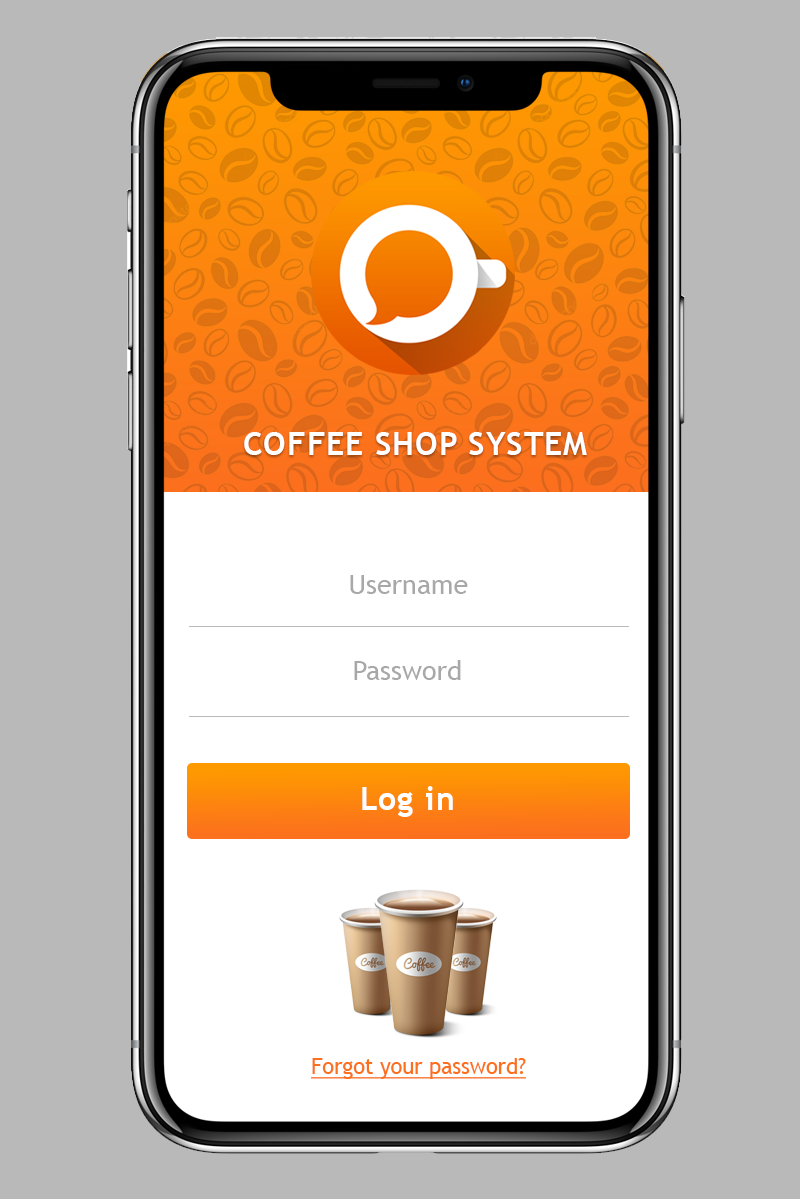
<style>
.page{position:relative;width:800px;height:1200px;background:#b9b9b9}
.page>*{position:absolute;margin:0}
.t1{font:32px "TrebuchetMS-Bold";letter-spacing:0.03em;color:#ffffff;text-transform:uppercase}
.t2{font:27px "TrebuchetMS";color:#a8a8a8}
.t3{font:32px "TrebuchetMS-Bold";letter-spacing:0.03em;color:#ffffff}
.t4{font:21.6px "TrebuchetMS";color:#fc701d;text-decoration:underline}
</style>
<div class="page">
<p class="t1" style="left:244px;top:432px;width:343px;height:23px">Coffee Shop System</p>
<p class="t2" style="left:350px;top:575px;width:118px;height:19px">Username</p>
<p class="t2" style="left:354px;top:660px;width:107px;height:20px">Password</p>
<p class="t3" style="left:362px;top:786px;width:91px;height:31px">Log in</p>
<p class="t4" style="left:311px;top:1058px;width:215px;height:21px">Forgot your password?</p>
</div>
